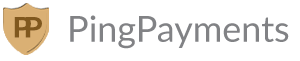
<style>
.page{position:relative;width:300px;height:61px;background:#ffffff}
.page>*{position:absolute;margin:0}
.t1{font:28.2px "Lato-Bold";color:#80581e;scale:1.1 1}
.t2{font:36px "Lato-Regular";color:#818285}
</style>
<div class="page">
<p class="t1" style="left:14px;top:17px;width:17px;height:21px">P</p>
<p class="t1" style="left:25px;top:17px;width:17px;height:21px">P</p>
<p class="t2" style="left:70px;top:15px;width:219px;height:34px">PingPayments</p>
</div>
